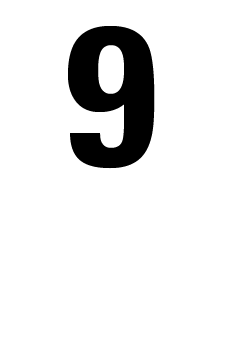
<style>
.page{position:relative;width:240px;height:360px;background:#ffffff}
.page>*{position:absolute;margin:0}
.t1{font:200px "Univeconbol";color:#000000;scale:1.06 1}
</style>
<div class="page">
<p class="t1" style="left:68px;top:26px;width:87px;height:143px">9</p>
</div>
